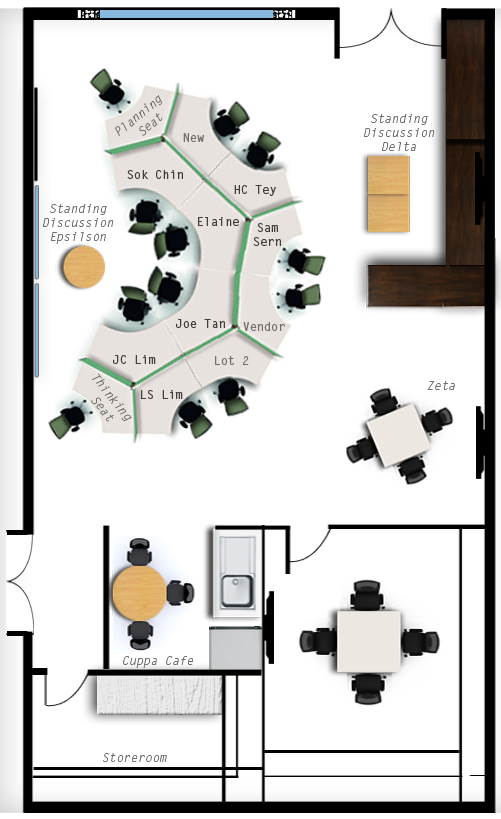
<style>
.page{position:relative;width:501px;height:819px;background:#ffffff}
.page>*{position:absolute;margin:0}
.t1{font:12px "LetterGothicStd-Slanted";color:#707070}
.t2{font:12px "LetterGothicStd-Bold";color:#707070}
.t3{font:12px "LetterGothicStd-Bold";color:#423c3c}
</style>
<div class="page">
<p class="t1" style="left:115px;top:95px;width:48px;height:41px;text-align:center;rotate:-40deg">Planning <br>Seat</p>
<p class="t1" style="left:364px;top:114px;width:71px;height:37px;text-align:center">Standing<br>Discussion<br>Delta</p>
<p class="t2" style="left:183px;top:133px;width:21px;height:9px">New</p>
<p class="t3" style="left:127px;top:170px;width:56px;height:9px">Sok Chin</p>
<p class="t3" style="left:234px;top:185px;width:42px;height:11px">HC Tey</p>
<p class="t1" style="left:43px;top:204px;width:71px;height:40px;text-align:center">Standing<br>Discussion<br>Epsilson</p>
<p class="t3" style="left:198px;top:217px;width:41px;height:9px">Elaine</p>
<p class="t3" style="left:253px;top:223px;width:28px;height:23px;text-align:center">Sam<br>Sern</p>
<p class="t3" style="left:176px;top:319px;width:49px;height:9px">Joe Tan</p>
<p class="t2" style="left:243px;top:322px;width:42px;height:9px">Vendor</p>
<p class="t3" style="left:113px;top:355px;width:43px;height:9px">JC Lim</p>
<p class="t2" style="left:215px;top:356px;width:34px;height:9px">Lot 2</p>
<p class="t1" style="left:91px;top:373px;width:41px;height:49px;text-align:center;rotate:51deg">Thinking <br>Seat</p>
<p class="t3" style="left:141px;top:390px;width:42px;height:9px">LS Lim</p>
<p class="t1" style="left:427px;top:381px;width:28px;height:9px">Zeta</p>
<p class="t1" style="left:123px;top:656px;width:71px;height:12px">Cuppa Cafe</p>
<p class="t1" style="left:103px;top:753px;width:64px;height:9px">Storeroom</p>
</div>
